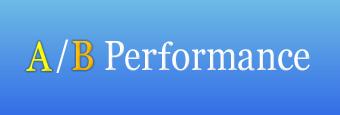
<style>
.page{position:relative;width:340px;height:115px}
.page>*{position:absolute;margin:0}
.t1{font:42px "Georgia";letter-spacing:0.06em;color:#ffff00;scale:0.86 1}
.t2{font:34.4px "Georgia";letter-spacing:-0.03em;color:#fefefe;scale:1.04 1}
.t3{font:42px "Georgia";letter-spacing:-0.02em;color:#ffba00;scale:0.85 1}
.t4{font:42px "Georgia";color:#ffffff;scale:0.86 1}
.t5{font:42px "Georgia";letter-spacing:-0.02em;color:#ffffff;scale:0.82 1}
.t6{font:42px "Georgia";color:#ffffff;scale:0.82 1}
.t7{font:42px "Georgia";letter-spacing:0.04em;color:#ffffff;scale:0.92 1}
.t8{font:37.8px "Georgia";letter-spacing:0.02em;color:#ffffff}
</style>
<div class="page">
<p class="t1" style="left:26px;top:41px;width:26px;height:30px">A</p>
<p class="t2" style="left:56px;top:39px;width:13px;height:34px;rotate:-4deg">/</p>
<p class="t3" style="left:72px;top:41px;width:21px;height:29px">B</p>
<p class="t4" style="left:105px;top:41px;width:205px;height:30px"><span class="t5">P</span><span class="t6">e</span><span class="t7">r</span><span class="t8">f</span>ormance</p>
</div>
